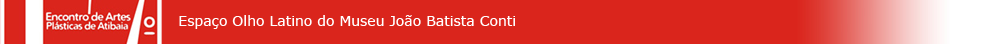
<style>
.page{position:relative;width:998px;height:44px;background:#da251c}
.page>*{position:absolute;margin:0}
.t1{font:14px "MSReferenceSansSerif";color:#ffffff}
</style>
<div class="page">
<p class="t1" style="left:179px;top:15px;width:336px;height:14px">Espaço Olho Latino do Museu João Batista Conti</p>
</div>
